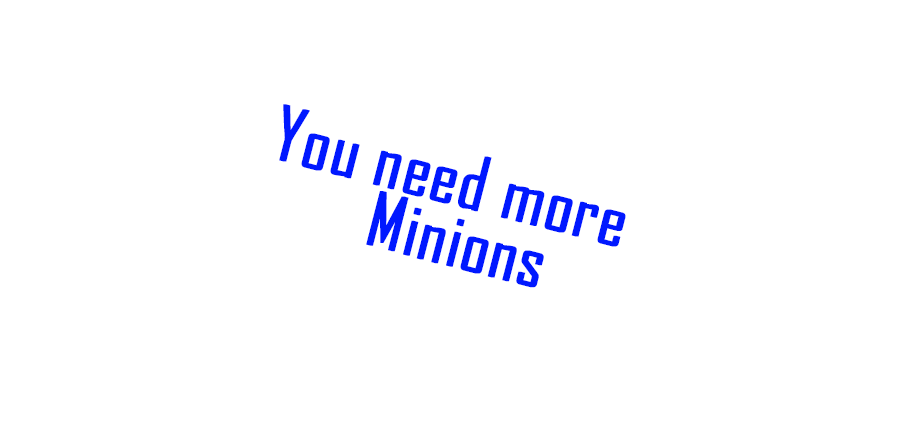
<style>
.page{position:relative;width:915px;height:423px;background:#ffffff}
.page>*{position:absolute;margin:0}
.t1{font:72px/60px "AgencyFB-Reg";color:#0018ff;font-weight:bold}
</style>
<div class="page">
<p class="t1" style="left:279px;top:104px;width:347px;height:184px;rotate:14deg">You need more<br>Minions</p>
</div>
